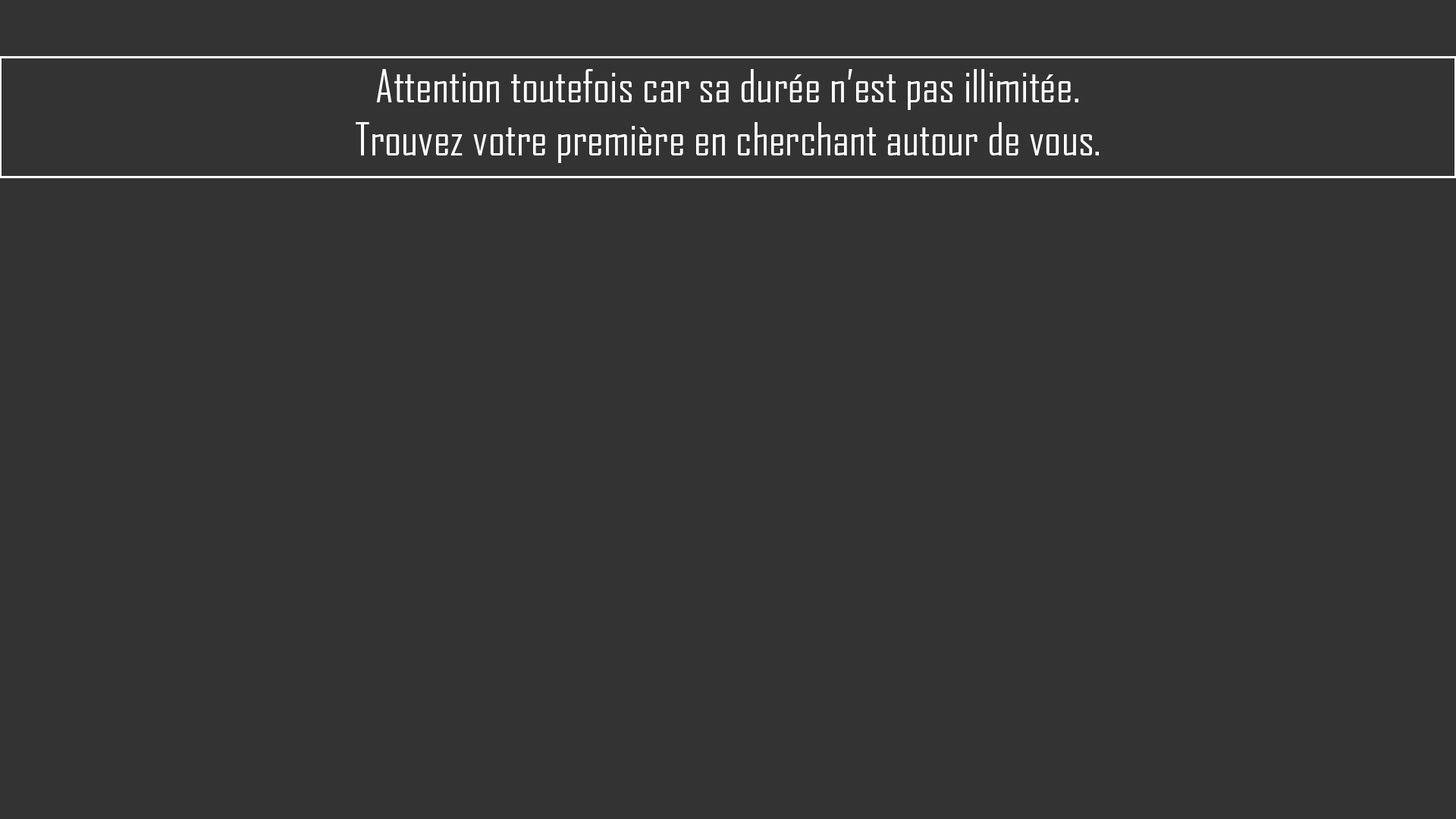
<style>
.page{position:relative;width:1456px;height:819px;background:#333333}
.page>*{position:absolute;margin:0}
.t1{font:44.2px "AgencyFB-Reg";color:#ffffff}
</style>
<div class="page">
<p class="t1" style="left:356px;top:69px;width:743px;height:94px;text-align:center">Attention toutefois car sa durée n’est pas illimitée.<br>Trouvez votre première en cherchant autour de vous.</p>
</div>
